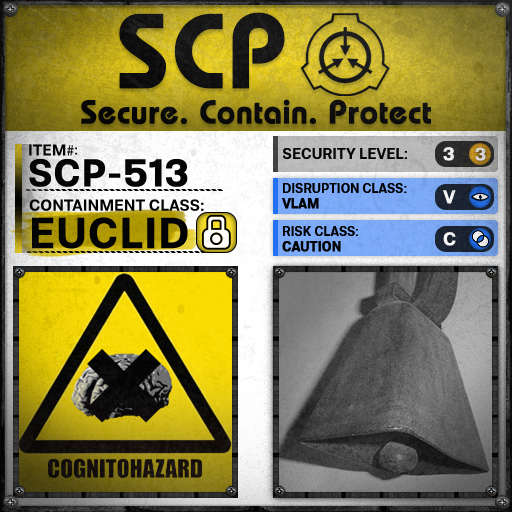
<style>
.page{position:relative;width:512px;height:512px}
.page>*{position:absolute;margin:0}
.t1{font:105.8px "BauhausLT-Demi";color:#000000;font-weight:bold}
.t2{font:33px "BauhausLT-Demi";color:#000000;font-weight:bold}
.t3{font:15.7px "Molde-Semibold";color:#000000}
.t4{font:15.7px "MyriadPro-Regular";color:#000000}
.t5{font:13.7px "Molde-Semibold";color:#000000}
.t6{font:15px "Molde-Semibold";color:#000000}
.t7{font:18.6px "Molde-Semibold";color:#ffffff;font-weight:bold}
.t8{font:17.8px "Molde-Semibold";color:#d6d7d7;font-weight:bold}
.t9{font:38.2px "Molde-Semibold";color:#000000;font-weight:bold}
.t10{font:12.8px "Molde-Semibold";color:#000000}
.t11{font:12.8px "Molde-Semibold";color:#000000;font-weight:bold}
.t12{font:15.9px "Molde-Semibold";color:#000000}
.t13{font:42.8px "Molde-Semibold";color:#000000;font-weight:bold}
</style>
<div class="page">
<p class="t1" style="left:119px;top:12px;width:166px;height:77px">SCP</p>
<p class="t2" style="left:81px;top:99px;width:350px;height:26px">Secure. Contain. Protect</p>
<p class="t3" style="left:29px;top:144px;width:45px;height:12px">ITEM<span class="t4">#</span></p>
<p class="t5" style="left:75px;top:147px;width:2px;height:8px">:</p>
<p class="t6" style="left:283px;top:148px;width:124px;height:11px">SECURITY LEVEL:</p>
<p class="t7" style="left:443px;top:147px;width:11px;height:14px">3</p>
<p class="t8" style="left:475px;top:147px;width:11px;height:14px">3</p>
<p class="t9" style="left:29px;top:159px;width:159px;height:28px">SCP-513</p>
<p class="t10" style="left:282px;top:183px;width:125px;height:26px">DISRUPTION CLASS:<br><span class="t11">VLAM</span></p>
<p class="t7" style="left:443px;top:190px;width:13px;height:14px">V</p>
<p class="t12" style="left:29px;top:199px;width:175px;height:12px">CONTAINMENT CLASS:</p>
<p class="t13" style="left:32px;top:217px;width:156px;height:32px">EUCLID</p>
<p class="t10" style="left:282px;top:226px;width:76px;height:26px">RISK CLASS:<br><span class="t11">CAUTION</span></p>
<p class="t7" style="left:443px;top:232px;width:13px;height:14px">C</p>
</div>
